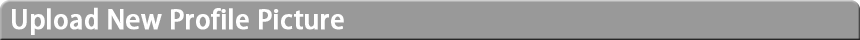
<style>
.page{position:relative;width:860px;height:40px;background:#999999}
.page>*{position:absolute;margin:0}
.t1{font:26px "AdobeHeitiStd-Regular";color:#ffffff;font-weight:bold}
</style>
<div class="page">
<p class="t1" style="left:12px;top:7px;width:332px;height:28px">Upload New Profile Picture</p>
</div>
